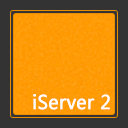
<style>
.page{position:relative;width:128px;height:128px;background:#333333}
.page>*{position:absolute;margin:0}
.t1{font:18.9px "MicrosoftYaHei";color:#ffffff;font-weight:bold;scale:0.95 1}
</style>
<div class="page">
<p class="t1" style="left:33px;top:94px;width:77px;height:16px">iServer 2</p>
</div>
